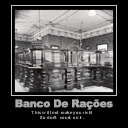
<style>
.page{position:relative;width:128px;height:128px;background:#000000}
.page>*{position:absolute;margin:0}
.t1{font:10.7px "Arial-Black";letter-spacing:-0.03em;color:#aaaaaa}
</style>
<div class="page">
<p class="t1" style="left:15px;top:99px;width:98px;height:11px">Banco De Rações</p>
</div>
